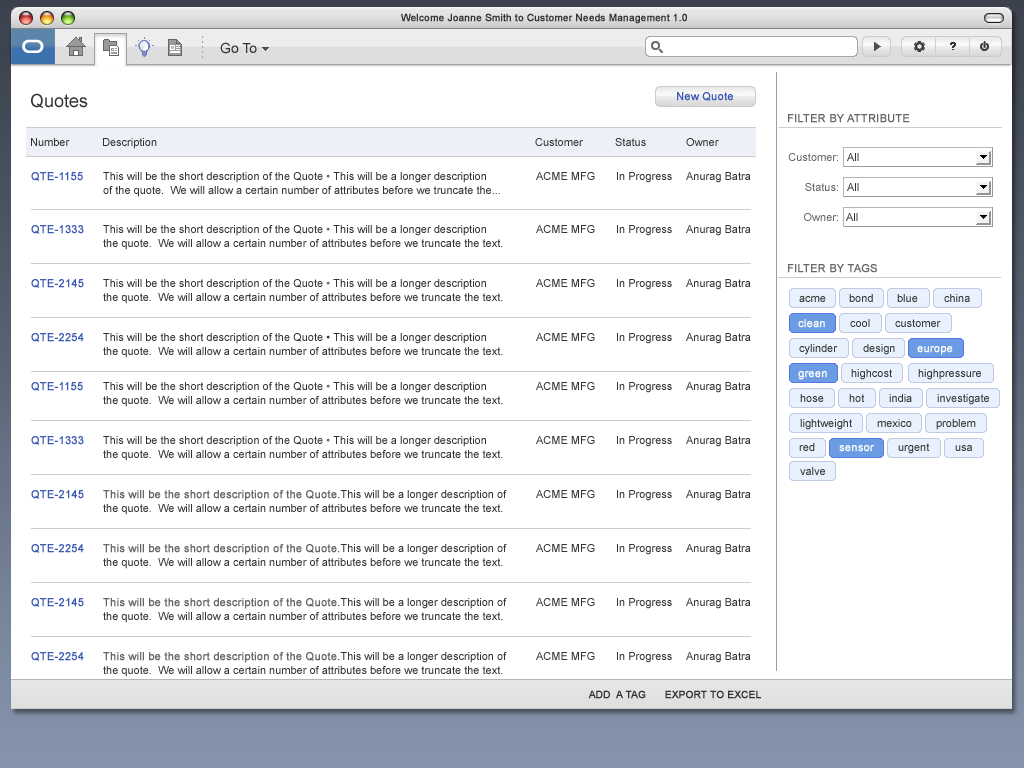
<style>
.page{position:relative;width:1024px;height:768px;background:#ffffff}
.page>*{position:absolute;margin:0}
.t1{font:10px "ArialMT";color:#333333;font-weight:bold}
.t2{font:14px "ArialMT";color:#333333}
.t3{font:18px "ArialMT";color:#333333}
.t4{font:11px "ArialMT";color:#3c5ab3;font-weight:bold}
.t5{font:11px "ArialMT";color:#666666;text-transform:uppercase;font-weight:bold}
.t6{font:11px "ArialMT";color:#333333}
.t7{font:11px "ArialMT";color:#666666}
.t8{font:11px/14px "ArialMT";color:#333333}
.t9{font:11px/20px "ArialMT";color:#333333}
.t10{font:11px/20px "ArialMT";color:#666666}
.t11{font:11px "ArialMT";color:#ffffff;font-weight:bold}
.t12{font:11px/20px "ArialMT";color:#666666;font-weight:bold}
.t13{font:10px "ArialMT";color:#333333;text-transform:uppercase;font-weight:bold}
</style>
<div class="page">
<p class="t1" style="left:401px;top:13px;width:286px;height:11px">Welcome Joanne Smith to Customer Needs Management 1.0</p>
<p class="t2" style="left:220px;top:42px;width:37px;height:12px">Go To</p>
<p class="t3" style="left:31px;top:93px;width:57px;height:15px">Quotes</p>
<p class="t4" style="left:677px;top:92px;width:56px;height:9px">New Quote</p>
<p class="t5" style="left:788px;top:114px;width:122px;height:9px">Filter by attribute</p>
<p class="t6" style="left:31px;top:138px;width:39px;height:8px">Number</p>
<p class="t6" style="left:103px;top:138px;width:54px;height:11px">Description</p>
<p class="t6" style="left:535px;top:138px;width:48px;height:8px">Customer</p>
<p class="t6" style="left:615px;top:138px;width:31px;height:8px">Status</p>
<p class="t6" style="left:686px;top:138px;width:33px;height:8px">Owner</p>
<p class="t7" style="left:788px;top:153px;width:50px;height:8px">Customer:</p>
<p class="t6" style="left:847px;top:153px;width:12px;height:8px">All</p>
<p class="t4" style="left:31px;top:172px;width:52px;height:9px">QTE-1155</p>
<p class="t8" style="left:103px;top:172px;width:397px;height:25px"><span class="t9">This will be the short description of the Quote </span><span class="t10">• </span>This will be a longer description <br>of the quote.  We will allow a certain number of attributes before we truncate the...</p>
<p class="t6" style="left:536px;top:172px;width:59px;height:8px">ACME MFG</p>
<p class="t6" style="left:617px;top:172px;width:55px;height:11px">In Progress</p>
<p class="t6" style="left:686px;top:172px;width:65px;height:11px">Anurag Batra</p>
<p class="t7" style="left:805px;top:183px;width:33px;height:8px">Status:</p>
<p class="t6" style="left:847px;top:183px;width:12px;height:8px">All</p>
<p class="t7" style="left:804px;top:213px;width:34px;height:8px">Owner:</p>
<p class="t6" style="left:846px;top:213px;width:12px;height:8px">All</p>
<p class="t4" style="left:31px;top:225px;width:53px;height:9px">QTE-1333</p>
<p class="t8" style="left:103px;top:225px;width:400px;height:25px"><span class="t9">This will be the short description of the Quote</span><span class="t10"> • </span>This will be a longer description  <br>the quote.  We will allow a certain number of attributes before we truncate the text.</p>
<p class="t6" style="left:536px;top:225px;width:59px;height:8px">ACME MFG</p>
<p class="t6" style="left:617px;top:225px;width:55px;height:11px">In Progress</p>
<p class="t6" style="left:686px;top:225px;width:65px;height:11px">Anurag Batra</p>
<p class="t5" style="left:788px;top:264px;width:89px;height:9px">filter By tags</p>
<p class="t4" style="left:31px;top:279px;width:53px;height:9px">QTE-2145</p>
<p class="t8" style="left:103px;top:279px;width:400px;height:25px"><span class="t9">This will be the short description of the Quote</span><span class="t10"> • </span>This will be a longer description <br>the quote.  We will allow a certain number of attributes before we truncate the text.</p>
<p class="t6" style="left:536px;top:279px;width:59px;height:8px">ACME MFG</p>
<p class="t6" style="left:617px;top:279px;width:55px;height:11px">In Progress</p>
<p class="t6" style="left:686px;top:279px;width:65px;height:11px">Anurag Batra</p>
<p class="t6" style="left:849px;top:294px;width:24px;height:8px">bond</p>
<p class="t6" style="left:897px;top:294px;width:21px;height:8px">blue</p>
<p class="t6" style="left:944px;top:294px;width:26px;height:8px">china</p>
<p class="t6" style="left:799px;top:296px;width:27px;height:6px">acme</p>
<p class="t11" style="left:798px;top:319px;width:27px;height:9px">clean</p>
<p class="t6" style="left:850px;top:319px;width:20px;height:8px">cool</p>
<p class="t6" style="left:895px;top:319px;width:46px;height:8px">customer</p>
<p class="t4" style="left:31px;top:333px;width:53px;height:9px">QTE-2254</p>
<p class="t8" style="left:103px;top:333px;width:400px;height:25px"><span class="t9">This will be the short description of the Quote • </span>This will be a longer description<br>the quote.  We will allow a certain number of attributes before we truncate the text.</p>
<p class="t6" style="left:536px;top:333px;width:59px;height:8px">ACME MFG</p>
<p class="t6" style="left:617px;top:333px;width:55px;height:11px">In Progress</p>
<p class="t6" style="left:686px;top:333px;width:65px;height:11px">Anurag Batra</p>
<p class="t6" style="left:799px;top:344px;width:39px;height:11px">cylinder</p>
<p class="t6" style="left:863px;top:344px;width:32px;height:11px">design</p>
<p class="t11" style="left:917px;top:346px;width:36px;height:9px">europe</p>
<p class="t11" style="left:798px;top:371px;width:29px;height:9px">green</p>
<p class="t6" style="left:851px;top:369px;width:41px;height:11px">highcost</p>
<p class="t6" style="left:918px;top:369px;width:63px;height:11px">highpressure</p>
<p class="t4" style="left:31px;top:382px;width:52px;height:9px">QTE-1155</p>
<p class="t8" style="left:103px;top:382px;width:400px;height:25px"><span class="t9">This will be the short description of the Quote</span><span class="t10"> • </span>This will be a longer description <br>the quote.  We will allow a certain number of attributes before we truncate the text.</p>
<p class="t6" style="left:536px;top:382px;width:59px;height:8px">ACME MFG</p>
<p class="t6" style="left:617px;top:382px;width:55px;height:11px">In Progress</p>
<p class="t6" style="left:686px;top:382px;width:65px;height:11px">Anurag Batra</p>
<p class="t6" style="left:800px;top:394px;width:24px;height:8px">hose</p>
<p class="t6" style="left:849px;top:394px;width:16px;height:8px">hot</p>
<p class="t6" style="left:889px;top:394px;width:23px;height:8px">india</p>
<p class="t6" style="left:937px;top:394px;width:52px;height:11px">investigate</p>
<p class="t6" style="left:800px;top:419px;width:52px;height:11px">lightweight</p>
<p class="t6" style="left:877px;top:419px;width:35px;height:8px">mexico</p>
<p class="t6" style="left:936px;top:419px;width:40px;height:11px">problem</p>
<p class="t4" style="left:31px;top:436px;width:53px;height:9px">QTE-1333</p>
<p class="t8" style="left:103px;top:436px;width:400px;height:25px"><span class="t9">This will be the short description of the Quote</span><span class="t10"> • </span>This will be a longer description  <br>the quote.  We will allow a certain number of attributes before we truncate the text.</p>
<p class="t6" style="left:536px;top:436px;width:59px;height:8px">ACME MFG</p>
<p class="t6" style="left:617px;top:436px;width:55px;height:11px">In Progress</p>
<p class="t6" style="left:686px;top:436px;width:65px;height:11px">Anurag Batra</p>
<p class="t6" style="left:799px;top:443px;width:16px;height:8px">red</p>
<p class="t11" style="left:839px;top:445px;width:35px;height:7px">sensor</p>
<p class="t6" style="left:898px;top:443px;width:32px;height:11px">urgent</p>
<p class="t6" style="left:955px;top:445px;width:17px;height:6px">usa</p>
<p class="t6" style="left:800px;top:467px;width:25px;height:8px">valve</p>
<p class="t4" style="left:31px;top:490px;width:53px;height:9px">QTE-2145</p>
<p class="t8" style="left:103px;top:490px;width:404px;height:25px"><span class="t12">This will be the short description of the Quote.</span>This will be a longer description of <br>the quote.  We will allow a certain number of attributes before we truncate the text.</p>
<p class="t6" style="left:536px;top:490px;width:59px;height:8px">ACME MFG</p>
<p class="t6" style="left:617px;top:490px;width:55px;height:11px">In Progress</p>
<p class="t6" style="left:686px;top:490px;width:65px;height:11px">Anurag Batra</p>
<p class="t4" style="left:31px;top:544px;width:53px;height:9px">QTE-2254</p>
<p class="t8" style="left:103px;top:544px;width:404px;height:25px"><span class="t12">This will be the short description of the Quote.</span>This will be a longer description of <br>the quote.  We will allow a certain number of attributes before we truncate the text.</p>
<p class="t6" style="left:536px;top:544px;width:59px;height:8px">ACME MFG</p>
<p class="t6" style="left:617px;top:544px;width:55px;height:11px">In Progress</p>
<p class="t6" style="left:686px;top:544px;width:65px;height:11px">Anurag Batra</p>
<p class="t4" style="left:31px;top:598px;width:53px;height:9px">QTE-2145</p>
<p class="t8" style="left:103px;top:598px;width:404px;height:25px"><span class="t12">This will be the short description of the Quote.</span>This will be a longer description of <br>the quote.  We will allow a certain number of attributes before we truncate the text.</p>
<p class="t6" style="left:536px;top:598px;width:59px;height:8px">ACME MFG</p>
<p class="t6" style="left:617px;top:598px;width:55px;height:11px">In Progress</p>
<p class="t6" style="left:686px;top:598px;width:65px;height:11px">Anurag Batra</p>
<p class="t4" style="left:31px;top:652px;width:53px;height:9px">QTE-2254</p>
<p class="t8" style="left:103px;top:652px;width:404px;height:25px"><span class="t12">This will be the short description of the Quote.</span>This will be a longer description of <br>the quote.  We will allow a certain number of attributes before we truncate the text.</p>
<p class="t6" style="left:536px;top:652px;width:59px;height:8px">ACME MFG</p>
<p class="t6" style="left:617px;top:652px;width:55px;height:11px">In Progress</p>
<p class="t6" style="left:686px;top:652px;width:65px;height:11px">Anurag Batra</p>
<p class="t13" style="left:588px;top:690px;width:58px;height:9px">add  a tag</p>
<p class="t13" style="left:665px;top:690px;width:96px;height:9px">Export to excel</p>
</div>
